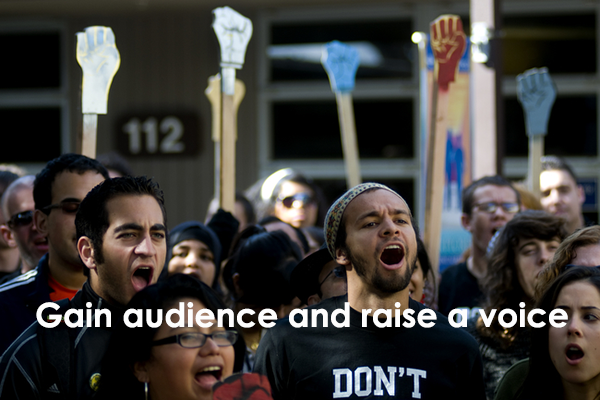
<style>
.page{position:relative;width:600px;height:400px}
.page>*{position:absolute;margin:0}
.t1{font:33.3px "CenturyGothic-Bold";color:#fdfdfd}
</style>
<div class="page">
<p class="t1" style="left:36px;top:302px;width:532px;height:26px">Gain audience and raise a voice</p>
</div>
